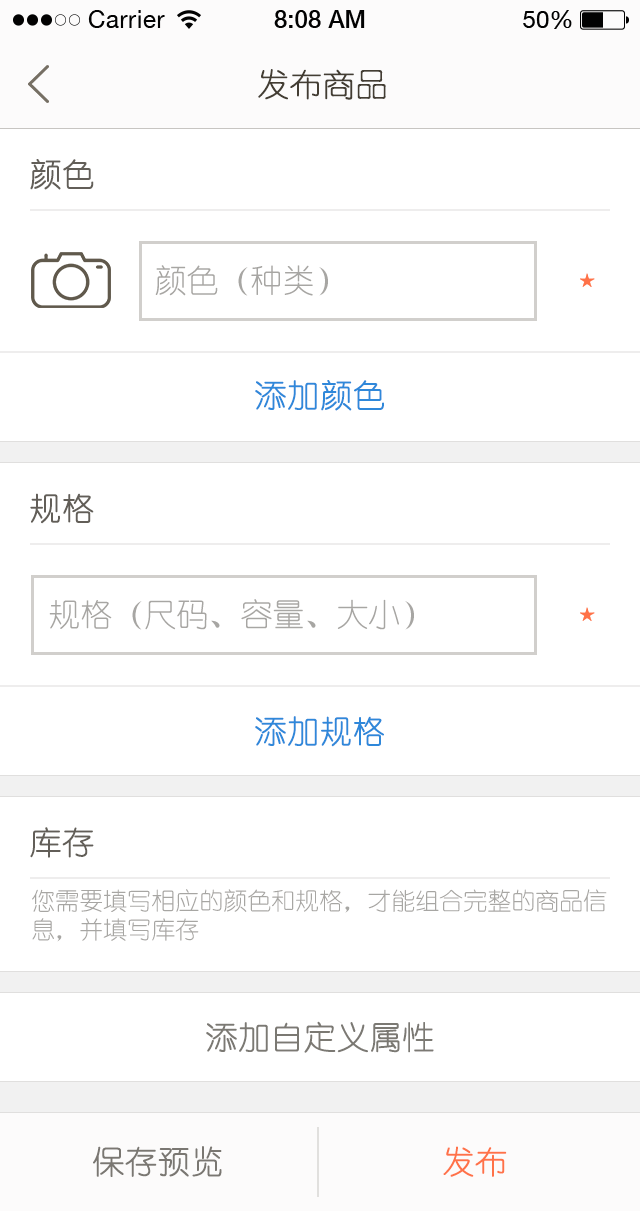
<style>
.page{position:relative;width:640px;height:1211px;background:#ffffff}
.page>*{position:absolute;margin:0}
.t1{font:32px "YouYuan";color:#433d33;text-transform:uppercase;font-weight:bold}
.t2{font:32px "YouYuan";color:#625e58;text-transform:uppercase;font-weight:bold}
.t3{font:32px "YouYuan";color:#a7a6a3;text-transform:uppercase}
.t4{font:32px "YouYuan";color:#2f88da;text-transform:uppercase;font-weight:bold}
.t5{font:24px "YouYuan";color:#a7a6a3;text-transform:uppercase}
.t6{font:32px "YouYuan";color:#7b7973;text-transform:uppercase;font-weight:bold}
.t7{font:32px "YouYuan";color:#7a7772;text-transform:uppercase;font-weight:bold}
.t8{font:32px "YouYuan";color:#ff7248;text-transform:uppercase;font-weight:bold}
</style>
<div class="page">
<p class="t1" style="left:258px;top:69px;width:128px;height:31px">发布商品</p>
<p class="t2" style="left:30px;top:159px;width:64px;height:31px">颜色</p>
<p class="t3" style="left:155px;top:265px;width:173px;height:31px">颜色（种类）</p>
<p class="t4" style="left:255px;top:380px;width:129px;height:31px">添加颜色</p>
<p class="t2" style="left:30px;top:493px;width:64px;height:31px">规格</p>
<p class="t3" style="left:49px;top:599px;width:365px;height:31px">规格（尺码、容量、大小）</p>
<p class="t4" style="left:255px;top:716px;width:129px;height:31px">添加规格</p>
<p class="t2" style="left:30px;top:827px;width:64px;height:31px">库存</p>
<p class="t5" style="left:32px;top:889px;width:575px;height:53px">您需要填写相应的颜色和规格，才能组合完整的商品信息，并填写库存</p>
<p class="t6" style="left:206px;top:1021px;width:228px;height:32px">添加自定义属性</p>
<p class="t7" style="left:93px;top:1146px;width:129px;height:31px">保存预览</p>
<p class="t8" style="left:443px;top:1146px;width:64px;height:31px">发布</p>
</div>
